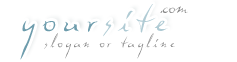
<style>
.page{position:relative;width:237px;height:62px;background:#ffffff}
.page>*{position:absolute;margin:0}
.t1{font:36px "Dali";letter-spacing:0.2em;color:#6d9cac}
.t2{font:36px "Dali";letter-spacing:0.2em;color:#b0cbd4}
.t3{font:18px "Dali";letter-spacing:0.01em;color:#888888}
.t4{font:14px/113.4px "Dali";letter-spacing:0.2em;color:#888888}
</style>
<div class="page">
<p class="t1" style="left:20px;top:4px;width:148px;height:56px">your<span class="t2">site</span></p>
<p class="t3" style="left:160px;top:6px;width:28px;height:7px">.com</p>
<p class="t4" style="left:44px;top:33px;width:131px;height:26px">slogan or tagline</p>
</div>
